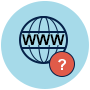
<style>
.page{position:relative;width:90px;height:90px;background:#a6dae9}
.page>*{position:absolute;margin:0}
.t1{font:15px "Arial-BoldMT";color:#000000}
.t2{font:15px "Arial-BoldMT";color:#ffffff}
</style>
<div class="page">
<p class="t1" style="left:22px;top:34px;width:43px;height:11px">WWW</p>
<p class="t2" style="left:58px;top:59px;width:8px;height:11px">?</p>
</div>
